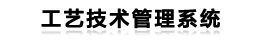
<style>
.page{position:relative;width:271px;height:50px;background:#ffffff}
.page>*{position:absolute;margin:0}
.t1{font:20.2px "FZLTZHK--GBK1-0";letter-spacing:0.1em;color:#000000;font-weight:bold}
</style>
<div class="page">
<p class="t1" style="left:41px;top:8px;width:179px;height:21px">工艺技术管理系统</p>
</div>
